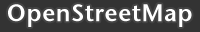
<style>
.page{position:relative;width:200px;height:32px;background:#333333}
.page>*{position:absolute;margin:0}
.t1{font:23.7px "StoneSansSemITCTTSemi";letter-spacing:0.025em;color:#ffffff}
</style>
<div class="page">
<p class="t1" style="left:8px;top:4px;width:184px;height:23px">OpenStreetMap</p>
</div>
